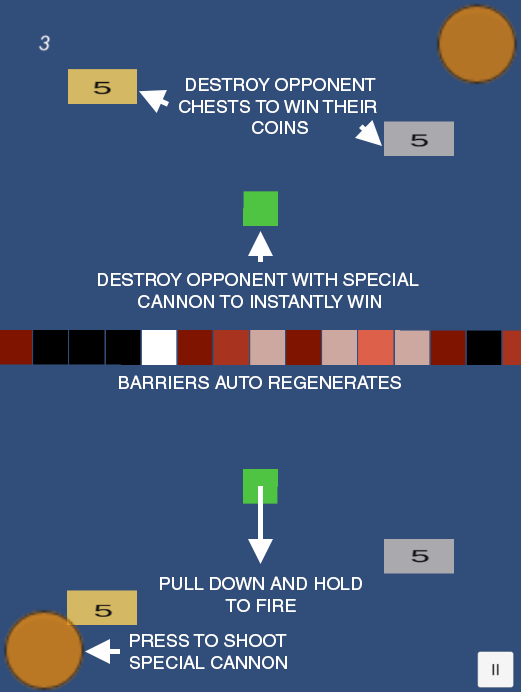
<style>
.page{position:relative;width:521px;height:692px;background:#314d79}
.page>*{position:absolute;margin:0}
.t1{font:18px "Helvetica";color:#ffffff}
</style>
<div class="page">
<p class="t1" style="left:179px;top:78px;width:198px;height:56px;text-align:center">DESTROY OPPONENT<br>CHESTS TO WIN THEIR <br>COINS</p>
<p class="t1" style="left:98px;top:272px;width:321px;height:36px;text-align:center">DESTROY OPPONENT WITH SPECIAL <br>CANNON TO INSTANTLY WIN</p>
<p class="t1" style="left:119px;top:375px;width:282px;height:14px">BARRIERS AUTO REGENERATES</p>
<p class="t1" style="left:160px;top:576px;width:202px;height:36px;text-align:center">PULL DOWN AND HOLD TO FIRE</p>
<p class="t1" style="left:130px;top:634px;width:157px;height:35px">PRESS TO SHOOT<br>SPECIAL CANNON</p>
</div>
